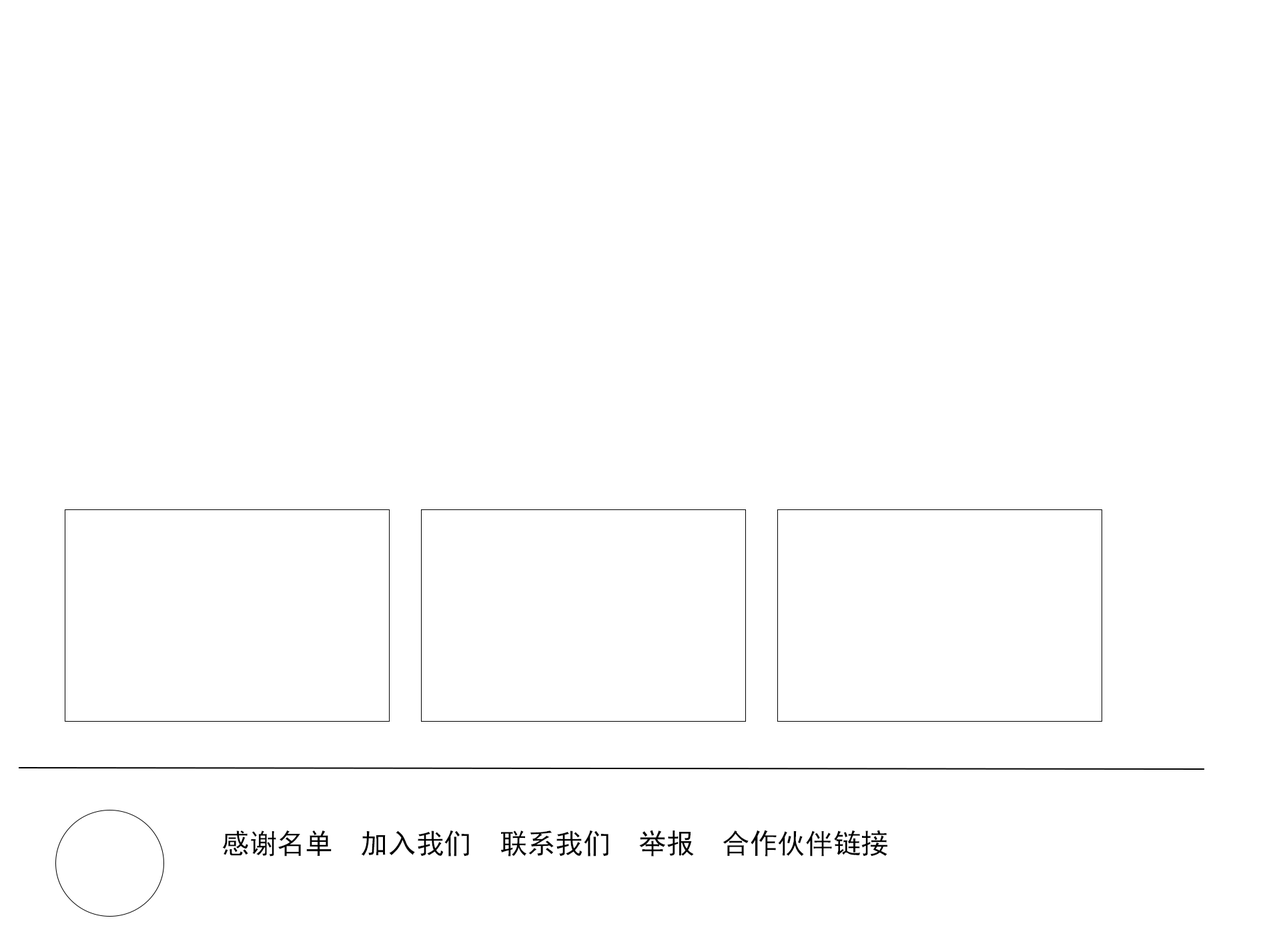
<style>
.page{position:relative;width:1261px;height:946px;background:#ffffff}
.page>*{position:absolute;margin:0}
.t1{font:27.8px "SimHei";color:#000000}
</style>
<div class="page">
<p class="t1" style="left:222px;top:829px;width:665px;height:27px">感谢名单  加入我们  联系我们  举报  合作伙伴链接</p>
</div>
